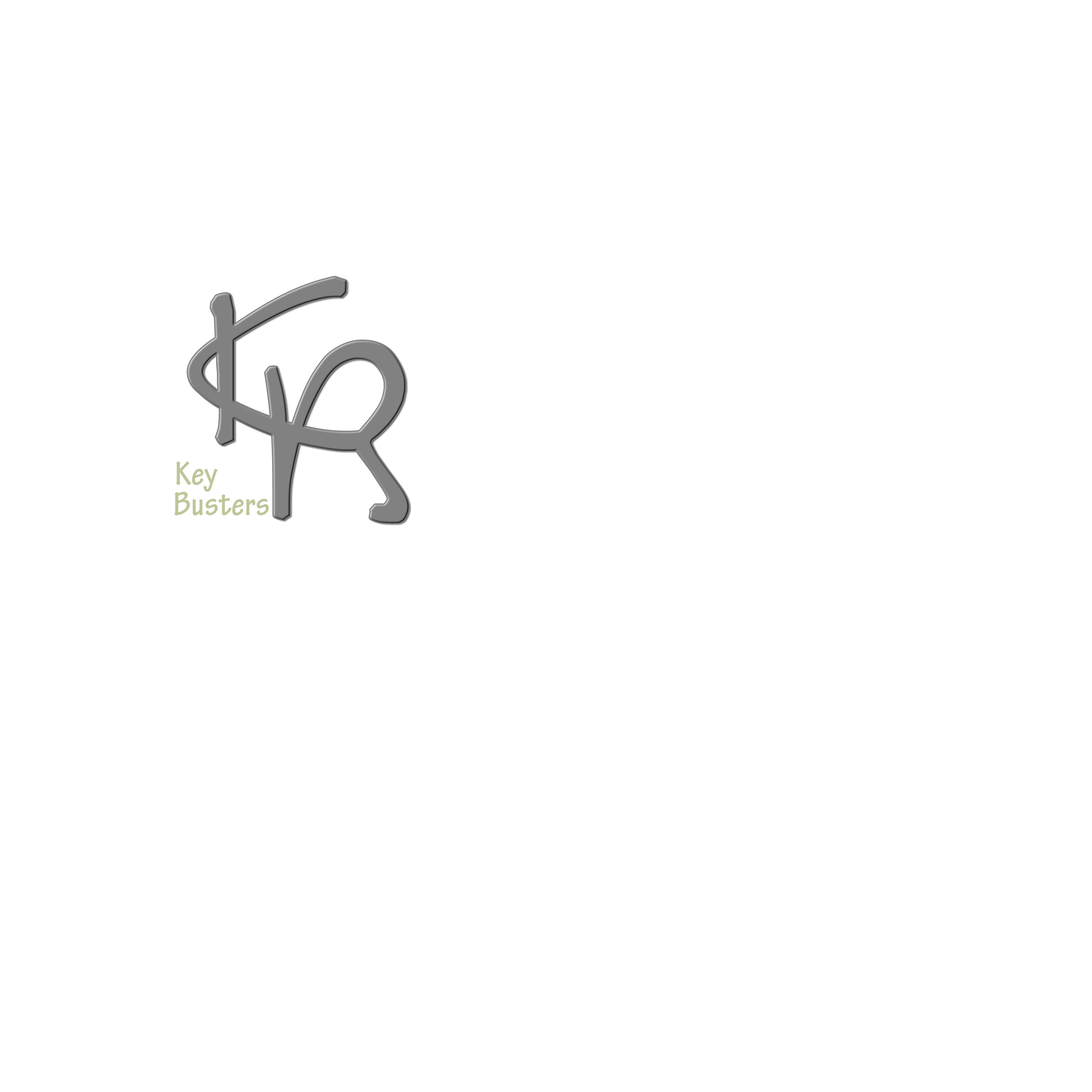
<style>
.page{position:relative;width:1092px;height:1092px;background:#fefffe}
.page>*{position:absolute;margin:0}
.t1{font:35.5px "TektonPro-BoldCond";color:#c0c59a}
</style>
<div class="page">
<p class="t1" style="left:176px;top:462px;width:42px;height:30px">Key</p>
<p class="t1" style="left:175px;top:492px;width:94px;height:24px">Busters</p>
</div>
